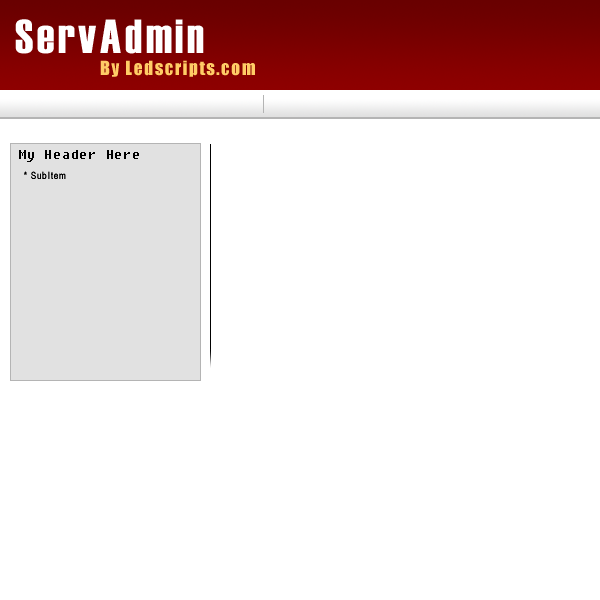
<style>
.page{position:relative;width:600px;height:600px;background:#ffffff}
.page>*{position:absolute;margin:0}
.t1{font:48px "Haettenschweiler";letter-spacing:0.075em;color:#ffffff}
.t2{font:18px "Impact";letter-spacing:0.075em;color:#ffcc66}
.t3{font:10px "Fixedsys";letter-spacing:0.075em;color:#000000}
.t4{font:10px "ArialNarrow";letter-spacing:0.075em;color:#000000}
</style>
<div class="page">
<p class="t1" style="left:15px;top:19px;width:189px;height:35px">ServAdmin</p>
<p class="t2" style="left:100px;top:60px;width:155px;height:17px">By Ledscripts.com</p>
<p class="t3" style="left:19px;top:150px;width:120px;height:12px">My Header Here</p>
<p class="t4" style="left:24px;top:171px;width:42px;height:8px">* SubItem</p>
</div>
